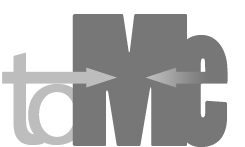
<style>
.page{position:relative;width:245px;height:147px;background:#777777}
.page>*{position:absolute;margin:0}
.t1{font:176.4px "PoplarStd";color:#777777}
.t2{font:186.4px "PoplarStd";color:#777777;scale:0.79 1}
.t3{font:146.2px "MyriadPro-Regular";color:#bdbdbd}
.t4{font:121px "MyriadPro-Regular";color:#bdbdbd}
</style>
<div class="page">
<p class="t1" style="left:72px;top:14px;width:115px;height:132px">M</p>
<p class="t2" style="left:176px;top:35px;width:52px;height:112px">e</p>
<p class="t3" style="left:2px;top:52px;width:43px;height:93px">t</p>
<p class="t4" style="left:28px;top:84px;width:58px;height:61px">o</p>
</div>
